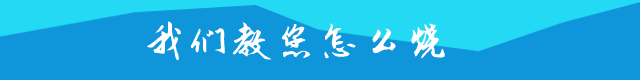
<style>
.page{position:relative;width:640px;height:80px;background:#0f95da}
.page>*{position:absolute;margin:0}
.t1{font:44px "zhimang-xing";color:#ffffff}
</style>
<div class="page">
<p class="t1" style="left:147px;top:21px;width:298px;height:40px">我们教您怎么烧</p>
</div>
